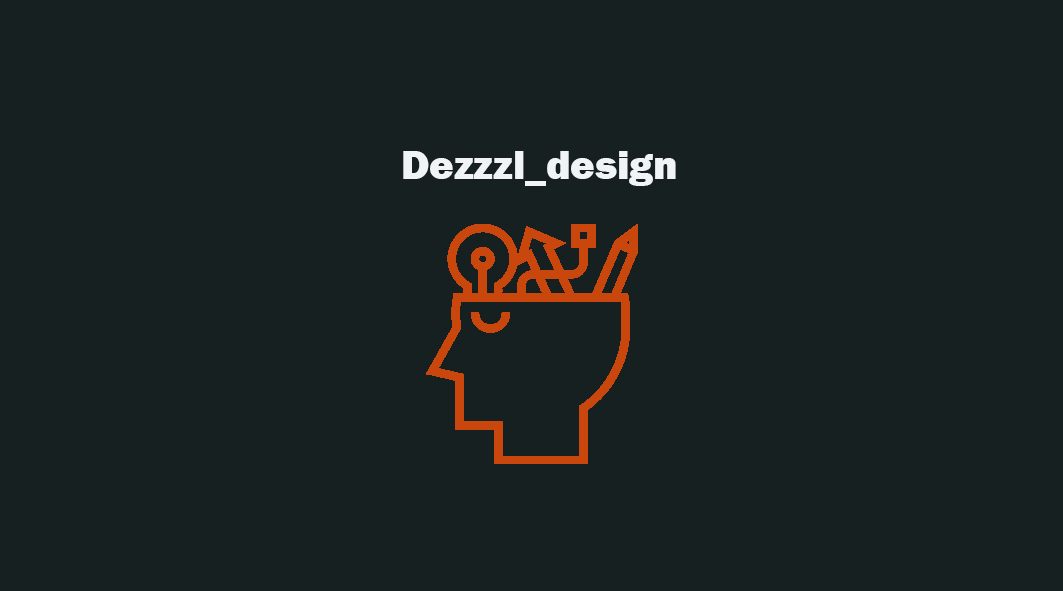
<style>
.page{position:relative;width:1063px;height:591px;background:#162021}
.page>*{position:absolute;margin:0}
.t1{font:41.7px "FranklinGothic-Heavy";color:#f0f4f4}
</style>
<div class="page">
<p class="t1" style="left:403px;top:151px;width:273px;height:35px">Dezzzl_design</p>
</div>
